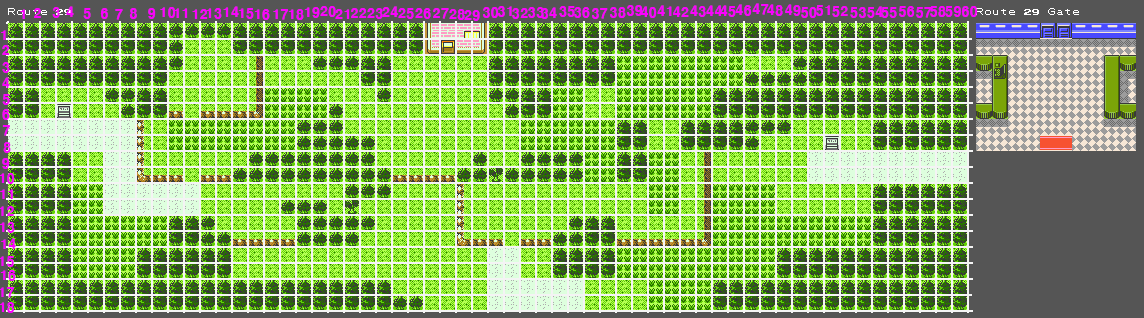
<style>
.page{position:relative;width:1144px;height:318px}
.page>*{position:absolute;margin:0}
.t1{font:13.3px "H2gtrE";color:#fc00ff}
</style>
<div class="page">
<p class="t1" style="left:66px;top:6px;width:8px;height:11px">4</p>
<p class="t1" style="left:223px;top:6px;width:16px;height:11px">14</p>
<p class="t1" style="left:320px;top:6px;width:16px;height:11px">20</p>
<p class="t1" style="left:382px;top:6px;width:16px;height:11px">24</p>
<p class="t1" style="left:498px;top:6px;width:14px;height:11px">31</p>
<p class="t1" style="left:559px;top:6px;width:16px;height:11px">35</p>
<p class="t1" style="left:627px;top:5px;width:16px;height:11px">39</p>
<p class="t1" style="left:640px;top:6px;width:17px;height:12px">40</p>
<p class="t1" style="left:657px;top:5px;width:15px;height:11px">41</p>
<p class="t1" style="left:673px;top:6px;width:16px;height:11px">42</p>
<p class="t1" style="left:690px;top:5px;width:16px;height:12px">43</p>
<p class="t1" style="left:706px;top:5px;width:16px;height:11px">44</p>
<p class="t1" style="left:720px;top:5px;width:16px;height:12px">45</p>
<p class="t1" style="left:735px;top:4px;width:17px;height:12px">46</p>
<p class="t1" style="left:752px;top:3px;width:17px;height:12px">47</p>
<p class="t1" style="left:767px;top:4px;width:16px;height:12px">48</p>
<p class="t1" style="left:785px;top:4px;width:16px;height:12px">49</p>
<p class="t1" style="left:816px;top:5px;width:14px;height:11px">51</p>
<p class="t1" style="left:832px;top:6px;width:16px;height:11px">52</p>
<p class="t1" style="left:867px;top:6px;width:16px;height:12px">54</p>
<p class="t1" style="left:899px;top:6px;width:16px;height:11px">56</p>
<p class="t1" style="left:930px;top:6px;width:16px;height:11px">58</p>
<p class="t1" style="left:945px;top:6px;width:16px;height:11px">59</p>
<p class="t1" style="left:961px;top:6px;width:17px;height:11px">60</p>
<p class="t1" style="left:20px;top:9px;width:5px;height:10px">1</p>
<p class="t1" style="left:34px;top:8px;width:7px;height:10px">2</p>
<p class="t1" style="left:52px;top:7px;width:8px;height:11px">3</p>
<p class="t1" style="left:83px;top:8px;width:8px;height:11px">5</p>
<p class="t1" style="left:100px;top:8px;width:8px;height:11px">6</p>
<p class="t1" style="left:115px;top:9px;width:8px;height:11px">7</p>
<p class="t1" style="left:129px;top:8px;width:8px;height:11px">8</p>
<p class="t1" style="left:148px;top:8px;width:8px;height:11px">9</p>
<p class="t1" style="left:160px;top:7px;width:16px;height:11px">10</p>
<p class="t1" style="left:174px;top:8px;width:14px;height:10px">11</p>
<p class="t1" style="left:192px;top:9px;width:16px;height:10px">12</p>
<p class="t1" style="left:206px;top:8px;width:16px;height:11px">13</p>
<p class="t1" style="left:238px;top:8px;width:16px;height:11px">15</p>
<p class="t1" style="left:254px;top:9px;width:16px;height:11px">16</p>
<p class="t1" style="left:273px;top:9px;width:15px;height:11px">17</p>
<p class="t1" style="left:288px;top:9px;width:16px;height:11px">18</p>
<p class="t1" style="left:304px;top:7px;width:16px;height:11px">19</p>
<p class="t1" style="left:335px;top:9px;width:15px;height:10px">21</p>
<p class="t1" style="left:351px;top:8px;width:16px;height:10px">22</p>
<p class="t1" style="left:367px;top:8px;width:16px;height:11px">23</p>
<p class="t1" style="left:398px;top:8px;width:16px;height:11px">25</p>
<p class="t1" style="left:415px;top:8px;width:16px;height:11px">26</p>
<p class="t1" style="left:433px;top:8px;width:16px;height:11px">27</p>
<p class="t1" style="left:449px;top:9px;width:16px;height:11px">28</p>
<p class="t1" style="left:464px;top:10px;width:16px;height:11px">29</p>
<p class="t1" style="left:483px;top:7px;width:16px;height:11px">30</p>
<p class="t1" style="left:512px;top:8px;width:16px;height:11px">32</p>
<p class="t1" style="left:528px;top:7px;width:16px;height:11px">33</p>
<p class="t1" style="left:541px;top:7px;width:16px;height:12px">34</p>
<p class="t1" style="left:574px;top:7px;width:16px;height:11px">36</p>
<p class="t1" style="left:592px;top:8px;width:16px;height:11px">37</p>
<p class="t1" style="left:610px;top:7px;width:16px;height:11px">38</p>
<p class="t1" style="left:801px;top:7px;width:16px;height:11px">50</p>
<p class="t1" style="left:850px;top:7px;width:16px;height:11px">53</p>
<p class="t1" style="left:881px;top:7px;width:16px;height:11px">55</p>
<p class="t1" style="left:916px;top:7px;width:16px;height:11px">57</p>
<p class="t1" style="left:1px;top:30px;width:5px;height:10px">1</p>
<p class="t1" style="left:2px;top:45px;width:8px;height:10px">2</p>
<p class="t1" style="left:2px;top:62px;width:8px;height:11px">3</p>
<p class="t1" style="left:2px;top:77px;width:8px;height:11px">4</p>
<p class="t1" style="left:2px;top:94px;width:8px;height:11px">5</p>
<p class="t1" style="left:2px;top:109px;width:8px;height:11px">6</p>
<p class="t1" style="left:2px;top:125px;width:8px;height:11px">7</p>
<p class="t1" style="left:3px;top:142px;width:8px;height:11px">8</p>
<p class="t1" style="left:2px;top:158px;width:8px;height:11px">9</p>
<p class="t1" style="left:0px;top:173px;width:15px;height:11px">10</p>
<p class="t1" style="left:0px;top:189px;width:13px;height:10px">11</p>
<p class="t1" style="left:0px;top:206px;width:14px;height:10px">12</p>
<p class="t1" style="left:0px;top:222px;width:15px;height:11px">13</p>
<p class="t1" style="left:1px;top:238px;width:15px;height:11px">14</p>
<p class="t1" style="left:0px;top:256px;width:14px;height:11px">15</p>
<p class="t1" style="left:0px;top:270px;width:16px;height:11px">16</p>
<p class="t1" style="left:0px;top:287px;width:14px;height:11px">17</p>
<p class="t1" style="left:0px;top:302px;width:15px;height:11px">18</p>
</div>
